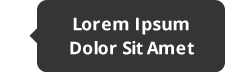
<style>
.page{position:relative;width:225px;height:72px;background:#353535}
.page>*{position:absolute;margin:0}
.t1{font:30px/24px "OpenSans-Bold";color:#ffffff}
</style>
<div class="page">
<p class="t1" style="left:70px;top:17px;width:124px;height:38px;text-align:center">Lorem Ipsum<br>Dolor Sit Amet</p>
</div>
